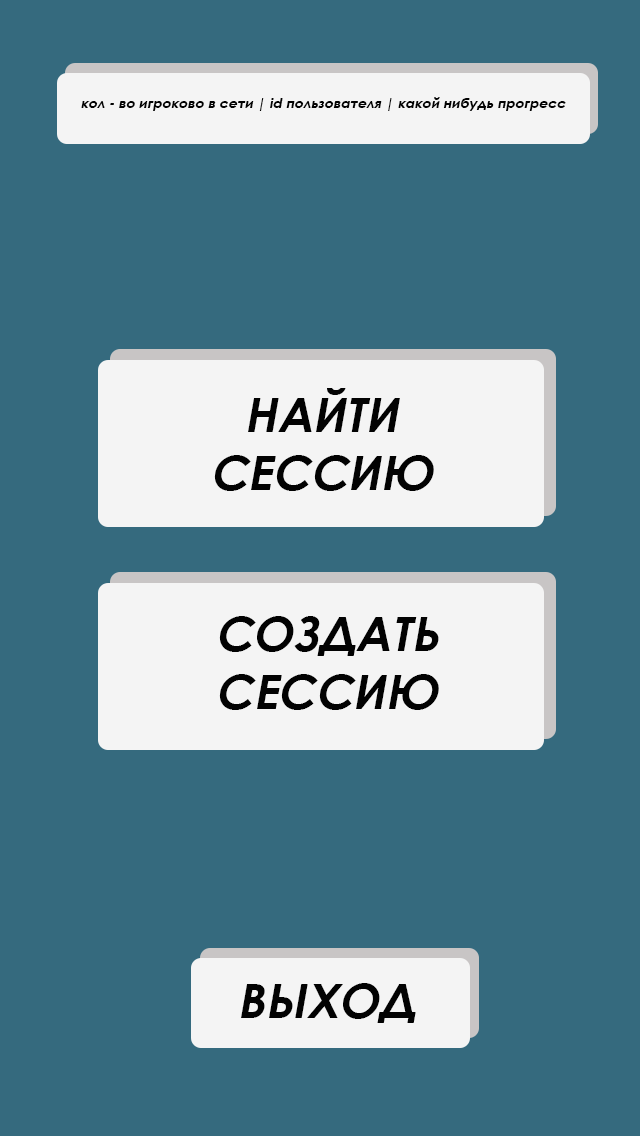
<style>
.page{position:relative;width:640px;height:1136px;background:#356a7e}
.page>*{position:absolute;margin:0}
.t1{font:14px "CenturyGothic-Bold";color:#020202;font-style:italic}
.t2{font:48px "CenturyGothic-Bold";color:#020202;font-style:italic}
</style>
<div class="page">
<p class="t1" style="left:81px;top:97px;width:485px;height:14px">кол - во игроково в сети | id пользователя | какой нибудь прогресс</p>
<p class="t2" style="left:214px;top:388px;width:220px;height:103px;text-align:center">НАЙТИ<br>СЕССИЮ</p>
<p class="t2" style="left:219px;top:616px;width:220px;height:94px;text-align:center">СОЗДАТЬ<br>СЕССИЮ</p>
<p class="t2" style="left:241px;top:983px;width:175px;height:40px">ВЫХОД</p>
</div>
